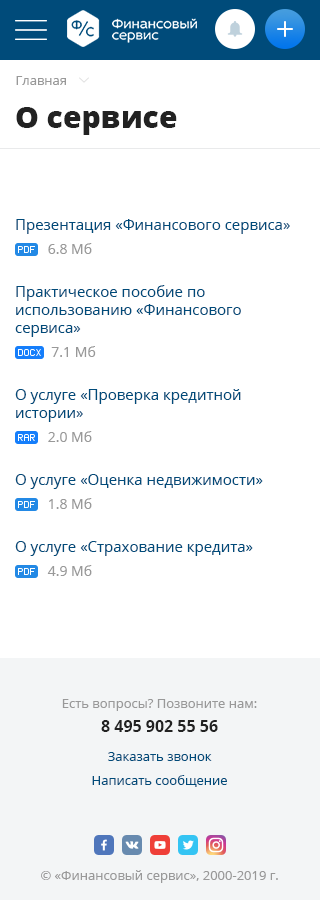
<style>
.page{position:relative;width:320px;height:900px;background:#ffffff}
.page>*{position:absolute;margin:0}
.t1{font:13px "OpenSans";color:#999999}
.t2{font:30px "OpenSans-Extrabold";color:#222222}
.t3{font:15px "OpenSans";color:#004b7a}
.t4{font:14px/24px "OpenSans";color:#999999}
.t5{font:13px/24px "OpenSans";color:#999999}
.t6{font:16px/24px "OpenSans-Bold";color:#222222}
.t7{font:13px/24px "OpenSans";color:#004b7a}
</style>
<div class="page">
<p class="t1" style="left:16px;top:76px;width:50px;height:9px">Главная</p>
<p class="t2" style="left:16px;top:107px;width:161px;height:28px">О сервисе</p>
<p class="t3" style="left:16px;top:219px;width:274px;height:35px">Презентация «Финансового сервиса»<br><span class="t4">         6.8 Мб</span></p>
<p class="t3" style="left:15px;top:285px;width:226px;height:72px">Практическое пособие по использованию «Финансового сервиса»<br><span class="t4">          7.1 Мб</span></p>
<p class="t3" style="left:15px;top:389px;width:226px;height:53px">О услуге «Проверка кредитной истории»<br><span class="t4">         2.0 Мб</span></p>
<p class="t3" style="left:15px;top:474px;width:248px;height:35px">О услуге «Оценка недвижимости»<br><span class="t4">         1.8 Мб</span></p>
<p class="t3" style="left:15px;top:541px;width:238px;height:35px">О услуге «Страхование кредита»<br><span class="t4">         4.9 Мб</span></p>
<p class="t5" style="left:62px;top:699px;width:195px;height:33px;text-align:center">Есть вопросы? Позвоните нам:<br><span class="t6">8 495 902 55 56</span></p>
<p class="t7" style="left:92px;top:752px;width:135px;height:35px;text-align:center">Заказать звонок          <br>Написать сообщение</p>
<p class="t1" style="left:41px;top:870px;width:237px;height:13px">© «Финансовый сервис», 2000-2019 г.</p>
</div>
